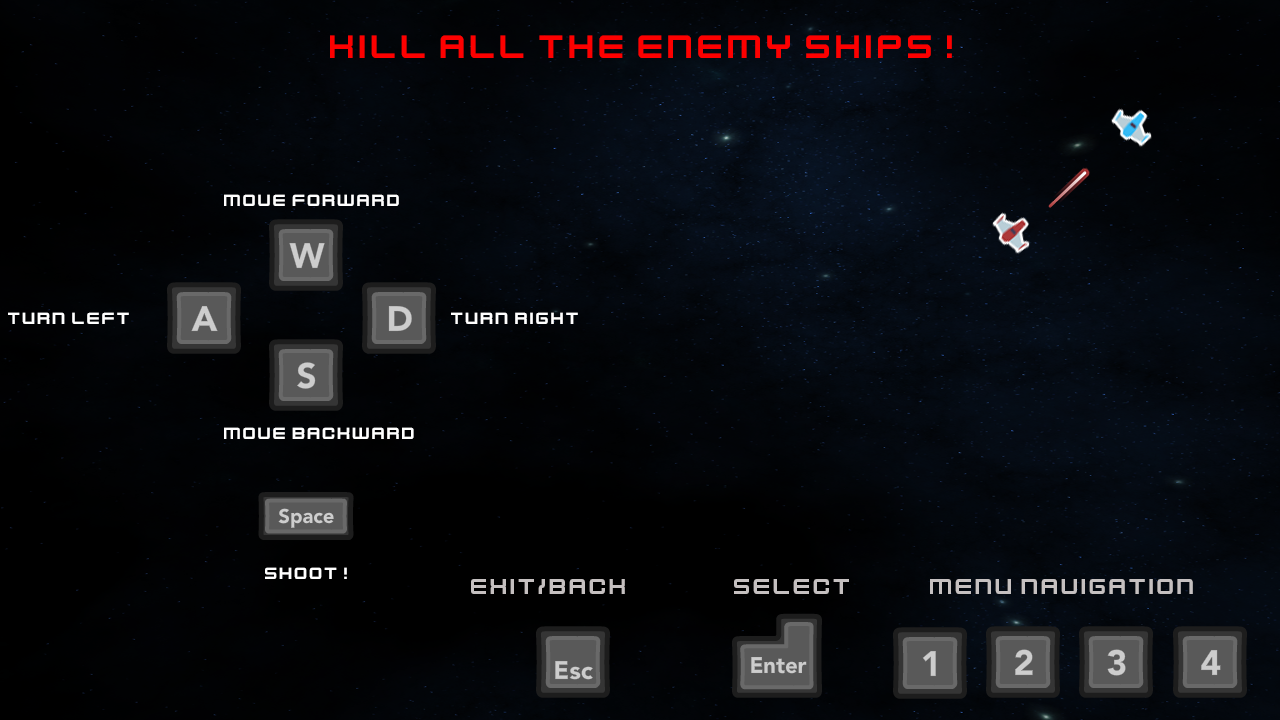
<style>
.page{position:relative;width:1280px;height:720px}
.page>*{position:absolute;margin:0}
.t1{font:36px "KenVector-Future";color:#fd0000}
.t2{font:18px "KenVector-Future";color:#ffffff}
.t3{font:24px "KenVector-Future";color:#c5c0c0}
</style>
<div class="page">
<p class="t1" style="left:330px;top:35px;width:622px;height:23px">kill all the enemy ships!</p>
<p class="t2" style="left:224px;top:194px;width:175px;height:12px">move forward</p>
<p class="t2" style="left:8px;top:312px;width:121px;height:12px">turn left</p>
<p class="t2" style="left:451px;top:312px;width:127px;height:12px">turn right</p>
<p class="t2" style="left:224px;top:427px;width:190px;height:12px">move backward</p>
<p class="t2" style="left:265px;top:567px;width:82px;height:12px">shoot!</p>
<p class="t3" style="left:471px;top:579px;width:154px;height:15px">Exit/back</p>
<p class="t3" style="left:734px;top:579px;width:115px;height:15px">select</p>
<p class="t3" style="left:930px;top:579px;width:263px;height:15px">menu navigation</p>
</div>
